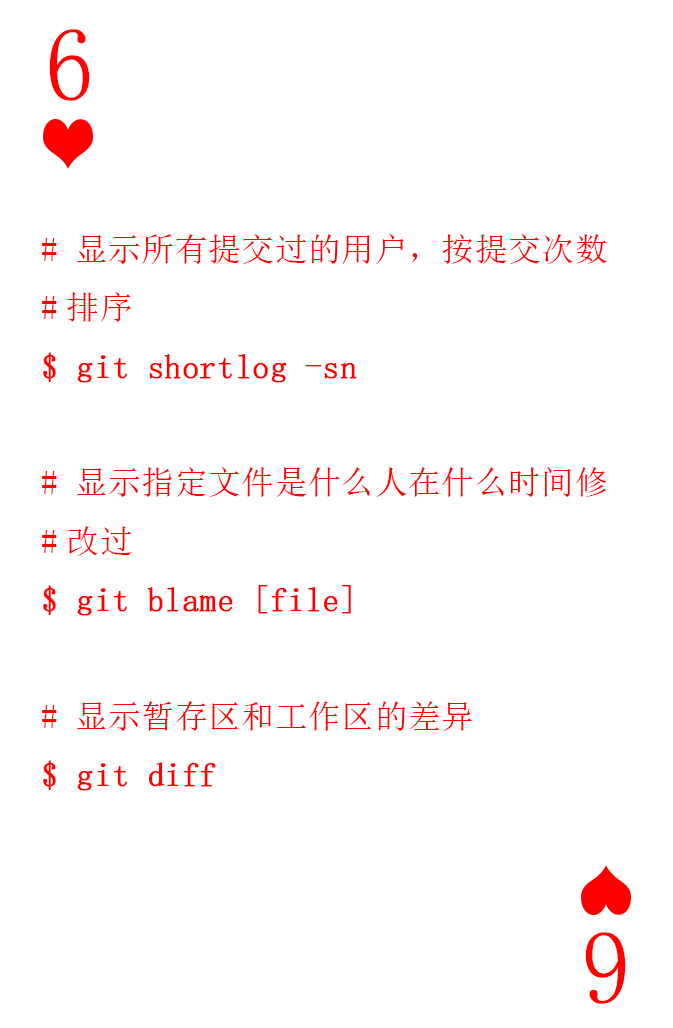
<style>
.page{position:relative;width:673px;height:1028px;background:#ffffff}
.page>*{position:absolute;margin:0}
.t1{font:104.2px "SimSun-ExtB";color:#ff0101;scale:0.93 1}
.t2{font:33.3px "SimSun";color:#ff0000}
.t3{font:33.3px "SimSun";color:#ff0000;font-weight:bold}
</style>
<div class="page">
<p class="t1" style="left:49px;top:29px;width:41px;height:72px">6</p>
<p class="t2" style="left:42px;top:234px;width:565px;height:557px"># 显示所有提交过的用户，按提交次数<br>#排序<br><span class="t3">$ git shortlog -sn<br></span><br># 显示指定文件是什么人在什么时间修<br>#改过<br><span class="t3">$ git blame [file]<br></span><br># 显示暂存区和工作区的差异<br><span class="t3">$ git diff</span></p>
<p class="t1" style="left:585px;top:932px;width:41px;height:72px;rotate:180deg">6</p>
</div>
